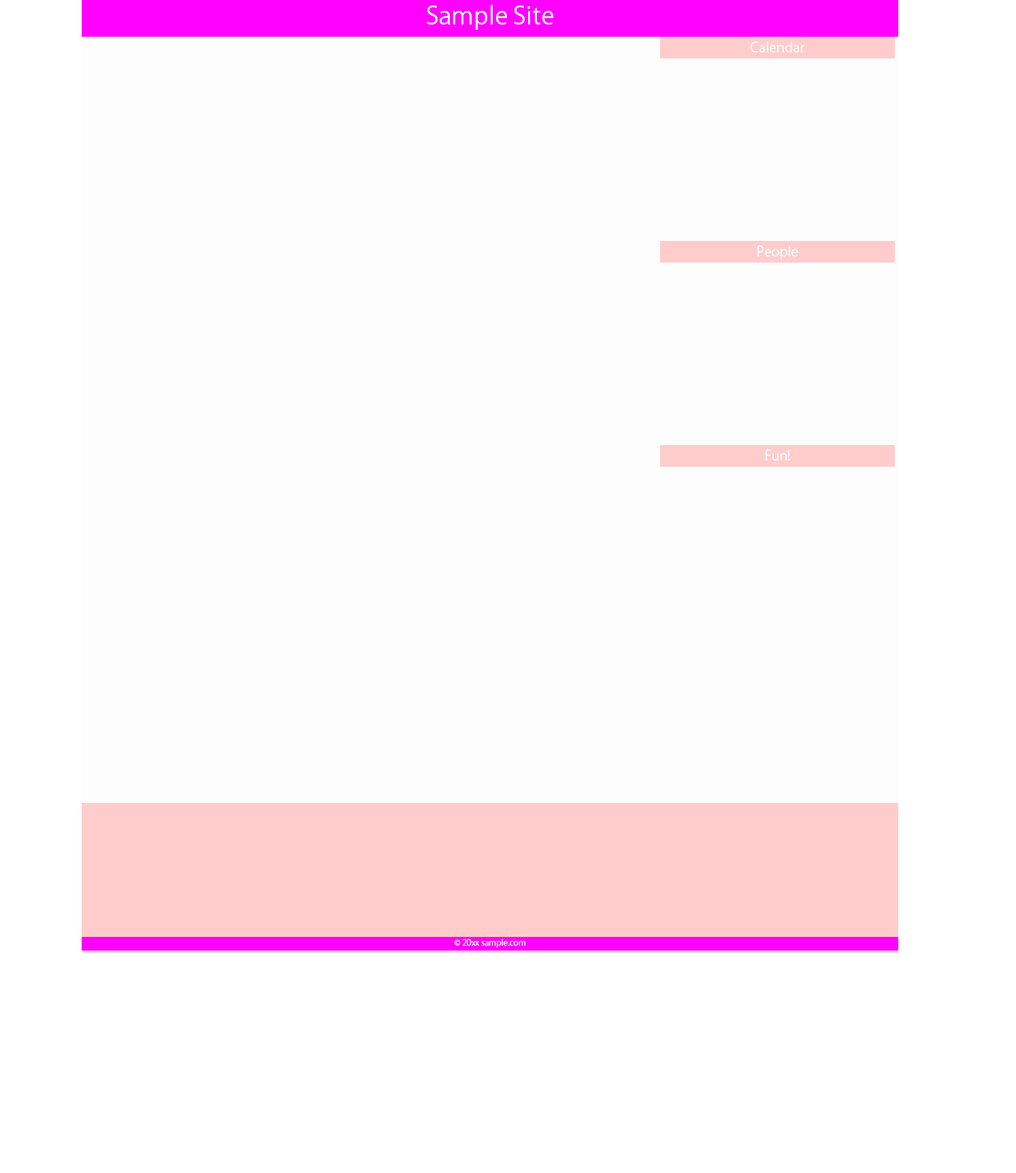
<style>
.page{position:relative;width:1016px;height:1173px;background:#fdfdfd}
.page>*{position:absolute;margin:0}
.t1{font:24.5px "KozGoPr6N-Regular";color:#ffffff}
.t2{font:13.6px "KozGoPr6N-Regular";color:#ffffff}
.t3{font:8.2px "KozGoPr6N-Regular";color:#ffffff}
</style>
<div class="page">
<p class="t1" style="left:427px;top:5px;width:126px;height:25px">Sample Site</p>
<p class="t2" style="left:751px;top:42px;width:54px;height:10px">Calendar</p>
<p class="t2" style="left:758px;top:246px;width:40px;height:13px">People</p>
<p class="t2" style="left:766px;top:450px;width:24px;height:11px">Fun!</p>
<p class="t3" style="left:455px;top:939px;width:70px;height:9px">© 20xx sample.com</p>
</div>
